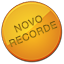
<style>
.page{position:relative;width:64px;height:64px;background:#ffffff}
.page>*{position:absolute;margin:0}
.t1{font:9.4px "HelveticaNeue-Light";letter-spacing:0.08em;color:#977113;font-weight:bold}
</style>
<div class="page">
<p class="t1" style="left:8px;top:15px;width:50px;height:32px;text-align:center;rotate:-23deg">NOVO<br>RECORDE</p>
</div>
